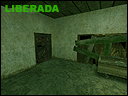
<style>
.page{position:relative;width:128px;height:96px}
.page>*{position:absolute;margin:0}
.t1{font:9.6px "Arial-Black";letter-spacing:0.005em;color:#2dae00;text-transform:uppercase}
</style>
<div class="page">
<p class="t1" style="left:5px;top:5px;width:54px;height:7px">liberada</p>
</div>
